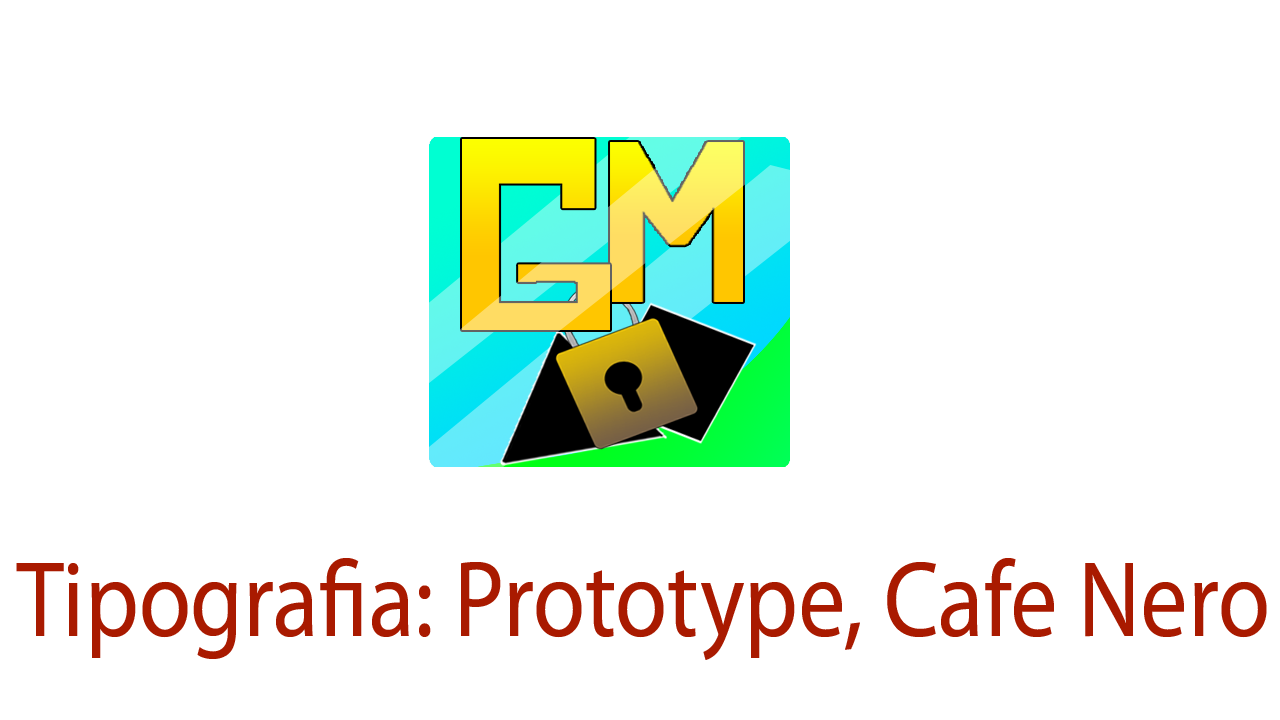
<style>
.page{position:relative;width:1280px;height:720px;background:#ffffff}
.page>*{position:absolute;margin:0}
.t1{font:108.6px "MyriadPro-Regular";color:#a91a00;scale:0.87 1}
</style>
<div class="page">
<p class="t1" style="left:16px;top:558px;width:1251px;height:102px">Tipografia: Prototype, Cafe Nero</p>
</div>
